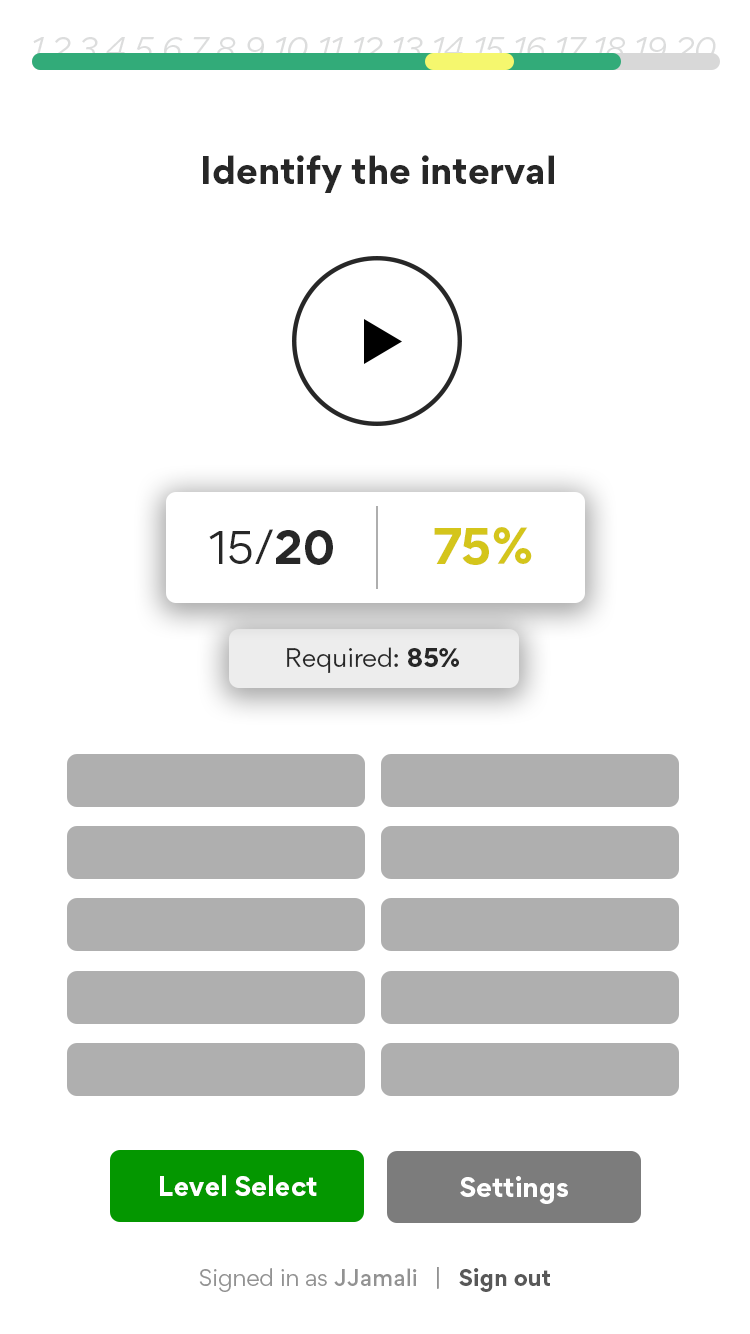
<style>
.page{position:relative;width:750px;height:1334px;background:#ffffff}
.page>*{position:absolute;margin:0}
.t1{font:34.8px "Gordita-Bold";color:#272727}
.t2{font:42px "Gordita-Regular";color:#272727}
.t3{font:42px "Gordita-Bold";color:#272727}
.t4{font:46px "Gordita-Bold";color:#d4c51b}
.t5{font:24.1px "Gordita-Regular";color:#272727}
.t6{font:24.1px "Gordita-Bold";color:#272727}
.t7{font:25.4px "Gordita-Bold";color:#ffffff}
.t8{font:21.6px "Gordita-Regular";color:#929292}
.t9{font:21.6px "Gordita-Medium";color:#929292}
.t10{font:21.6px "Gordita-Bold";color:#585858}
</style>
<div class="page">
<p class="t1" style="left:203px;top:155px;width:351px;height:38px">Identify the interval</p>
<p class="t2" style="left:209px;top:529px;width:124px;height:36px">15/<span class="t3">20</span></p>
<p class="t4" style="left:434px;top:527px;width:98px;height:38px">75%</p>
<p class="t5" style="left:287px;top:647px;width:172px;height:26px">Required: <span class="t6">85%</span></p>
<p class="t7" style="left:160px;top:1175px;width:157px;height:21px">Level Select</p>
<p class="t7" style="left:460px;top:1176px;width:108px;height:28px">Settings</p>
<p class="t8" style="left:199px;top:1267px;width:351px;height:25px">Signed in as <span class="t9">JJamali   </span>|   <span class="t10">Sign out</span></p>
</div>
